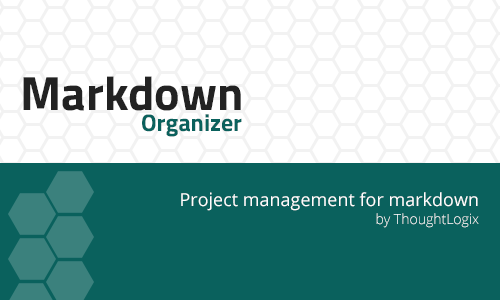
<style>
.page{position:relative;width:500px;height:300px;background:#0a615d}
.page>*{position:absolute;margin:0}
.t1{font:48px "TitilliumWeb-Bold";color:#222222}
.t2{font:24px "TitilliumWeb-Bold";color:#0a615d}
.t3{font:18px "OpenSans";color:#fffefe}
.t4{font:14px "OpenSans-Light";color:#fffefe}
</style>
<div class="page">
<p class="t1" style="left:23px;top:76px;width:218px;height:35px">Markdown</p>
<p class="t2" style="left:142px;top:114px;width:100px;height:23px">Organizer</p>
<p class="t3" style="left:181px;top:192px;width:297px;height:19px">Project management for markdown</p>
<p class="t4" style="left:376px;top:213px;width:103px;height:15px">by ThoughtLogix</p>
</div>
